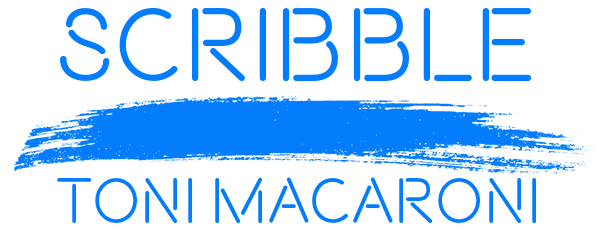
<style>
.page{position:relative;width:600px;height:240px;background:#ffffff}
.page>*{position:absolute;margin:0}
.t1{font:104.2px "Beon-Medium";color:#037dfc}
.t2{font:64.6px "Beon-Medium";color:#037dfc}
</style>
<div class="page">
<p class="t1" style="left:60px;top:8px;width:472px;height:74px">Scribble</p>
<p class="t2" style="left:57px;top:177px;width:479px;height:46px">Toni macaroni</p>
</div>
